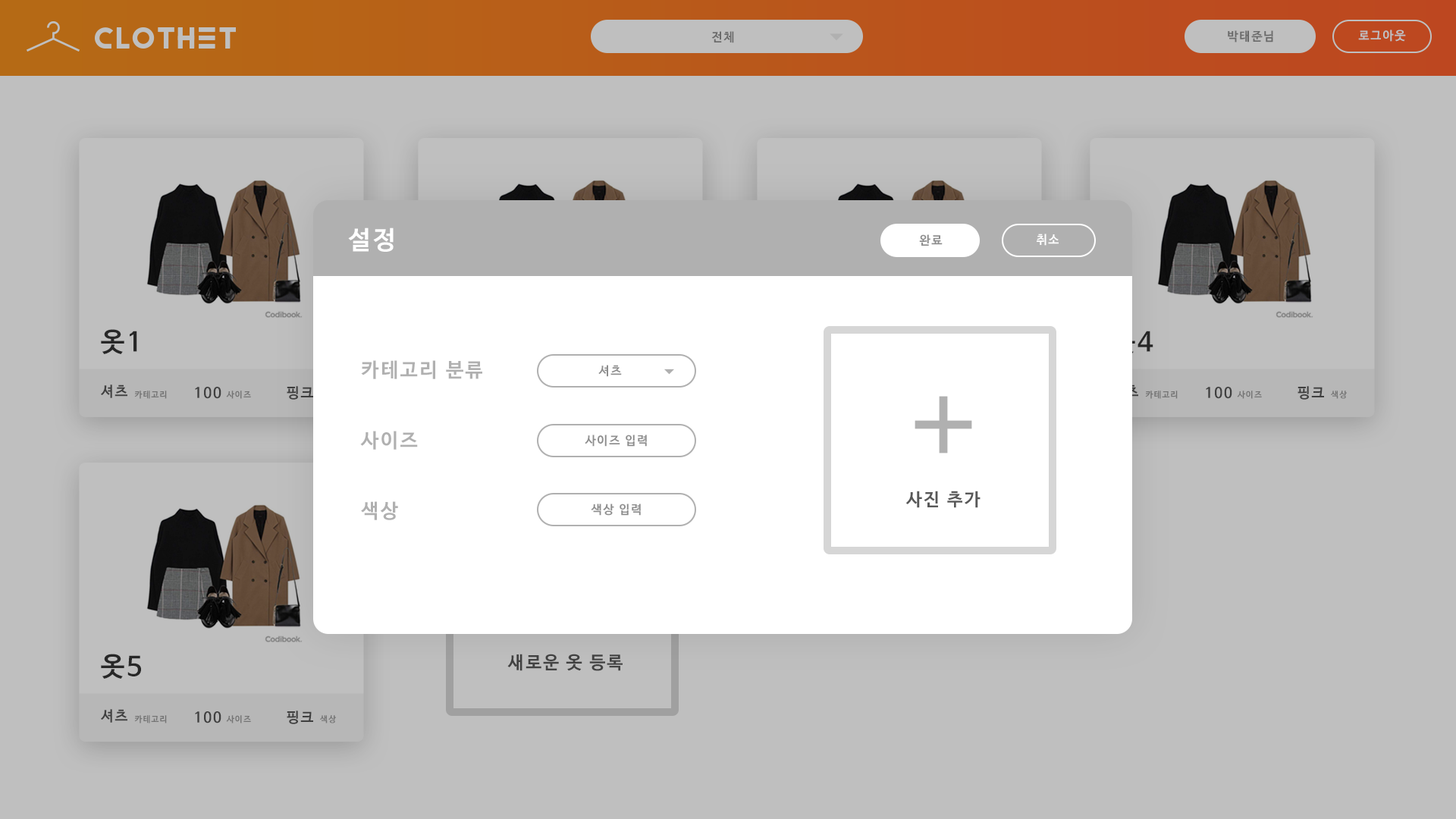
<style>
.page{position:relative;width:1456px;height:819px;background:#bfbfbf}
.page>*{position:absolute;margin:0}
.t1{font:12.1px "NanumBarunGothicBold";letter-spacing:0.1em;color:#bfbfbf}
.t2{font:12.1px "NanumBarunGothicBold";letter-spacing:0.1em;color:#6a6a6a}
.t3{font:25.3px "NanumBarunGothicBold";letter-spacing:0.1em;color:#ffffff}
.t4{font:12.1px "NanumBarunGothicBold";letter-spacing:0.1em;color:#ffffff}
.t5{font:12.1px "NanumBarunGothicBold";letter-spacing:0.1em;color:#8d8d8d}
.t6{font:26.4px "NanumBarunGothicBold";letter-spacing:0.1em;color:#272727}
.t7{font:19.7px "NanumBarunGothicBold";letter-spacing:0.1em;color:#b0b0b0}
.t8{font:14.3px "NanumBarunGothicBold";letter-spacing:0.1em;color:#3f3f3f}
.t9{font:14.3px "NanumBarunGothicBold";letter-spacing:0.1em;color:#3d3d3d}
.t10{font:8.5px "NanumBarunGothicBold";letter-spacing:0.1em;color:#747474}
.t11{font:17.7px "NanumBarunGothicBold";letter-spacing:0.1em;color:#585858}
.t12{font:17.7px "NanumBarunGothicBold";letter-spacing:0.1em;color:#414141}
</style>
<div class="page">
<p class="t1" style="left:1358px;top:30px;width:48px;height:12px">로그아웃</p>
<p class="t2" style="left:711px;top:31px;width:23px;height:12px">전체</p>
<p class="t2" style="left:1228px;top:30px;width:45px;height:12px">박태준님</p>
<p class="t3" style="left:348px;top:227px;width:46px;height:25px">설정</p>
<p class="t4" style="left:1037px;top:234px;width:22px;height:12px">취소</p>
<p class="t5" style="left:919px;top:234px;width:24px;height:12px">완료</p>
<p class="t6" style="left:101px;top:329px;width:36px;height:25px">옷1</p>
<p class="t7" style="left:361px;top:360px;width:121px;height:19px">카테고리 분류</p>
<p class="t5" style="left:598px;top:365px;width:24px;height:12px">셔츠</p>
<p class="t8" style="left:101px;top:384px;width:26px;height:14px">셔츠</p>
<p class="t8" style="left:195px;top:387px;width:26px;height:12px">100</p>
<p class="t9" style="left:287px;top:386px;width:26px;height:14px">핑크</p>
<p class="t8" style="left:1206px;top:387px;width:26px;height:12px">100</p>
<p class="t8" style="left:1297px;top:386px;width:27px;height:14px">핑크</p>
<p class="t10" style="left:134px;top:391px;width:33px;height:8px">카테고리</p>
<p class="t10" style="left:226px;top:391px;width:25px;height:8px">사이즈</p>
<p class="t10" style="left:1145px;top:391px;width:33px;height:8px">카테고리</p>
<p class="t10" style="left:1237px;top:391px;width:25px;height:8px">사이즈</p>
<p class="t10" style="left:1331px;top:391px;width:16px;height:8px">색상</p>
<p class="t7" style="left:360px;top:431px;width:58px;height:19px">사이즈</p>
<p class="t5" style="left:585px;top:435px;width:62px;height:12px">사이즈 입력</p>
<p class="t11" style="left:905px;top:491px;width:76px;height:17px">사진 추가</p>
<p class="t7" style="left:361px;top:501px;width:37px;height:19px">색상</p>
<p class="t5" style="left:591px;top:504px;width:50px;height:12px">색상 입력</p>
<p class="t6" style="left:101px;top:654px;width:40px;height:25px">옷5</p>
<p class="t12" style="left:507px;top:654px;width:116px;height:17px">새로운 옷 등록</p>
<p class="t8" style="left:101px;top:709px;width:26px;height:14px">셔츠</p>
<p class="t8" style="left:195px;top:711px;width:26px;height:12px">100</p>
<p class="t8" style="left:287px;top:711px;width:26px;height:13px">핑크</p>
<p class="t10" style="left:134px;top:715px;width:33px;height:8px">카테고리</p>
<p class="t10" style="left:226px;top:715px;width:25px;height:8px">사이즈</p>
<p class="t10" style="left:320px;top:715px;width:16px;height:8px">색상</p>
</div>
